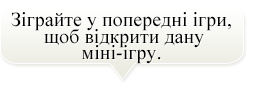
<style>
.page{position:relative;width:255px;height:85px;background:#ffffff}
.page>*{position:absolute;margin:0}
.t1{font:20px/16.7px "TimesNewRomanPSMT";color:#000000}
</style>
<div class="page">
<p class="t1" style="left:11px;top:12px;width:220px;height:52px;text-align:center">Зіграйте у попередні ігри,<br> щоб відкрити дану міні-ігру.</p>
</div>
